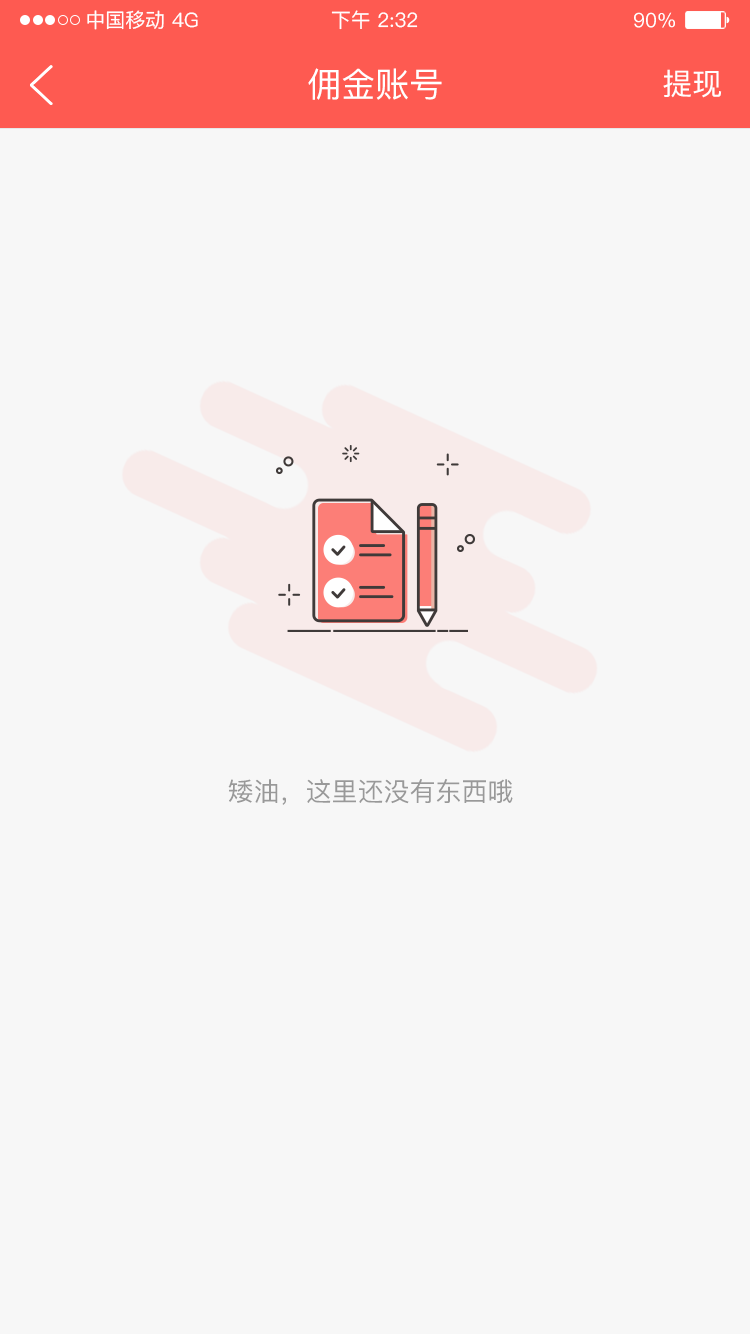
<style>
.page{position:relative;width:750px;height:1334px;background:#f7f7f7}
.page>*{position:absolute;margin:0}
.t1{font:20px "PingFang-SC-Medium";color:#ffffff}
.t2{font:34px "PingFang-SC-Medium";color:#ffffff}
.t3{font:30px "PingFang-SC-Medium";color:#fffefe}
.t4{font:26px "PingFang-SC-Medium";color:#999999}
</style>
<div class="page">
<p class="t1" style="left:87px;top:10px;width:77px;height:20px">中国移动</p>
<p class="t1" style="left:172px;top:12px;width:26px;height:16px">4G</p>
<p class="t1" style="left:331px;top:10px;width:87px;height:20px">下午 2:32</p>
<p class="t1" style="left:634px;top:12px;width:41px;height:16px">90%</p>
<p class="t2" style="left:308px;top:68px;width:134px;height:32px">佣金账号</p>
<p class="t3" style="left:663px;top:69px;width:59px;height:29px">提现</p>
<p class="t4" style="left:228px;top:779px;width:285px;height:26px">矮油，这里还没有东西哦</p>
</div>
